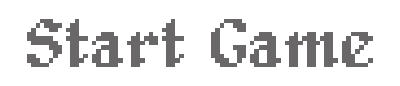
<style>
.page{position:relative;width:400px;height:86px;background:#ffffff}
.page>*{position:absolute;margin:0}
.t1{font:70px "Alagard";color:#696768}
</style>
<div class="page">
<p class="t1" style="left:27px;top:19px;width:346px;height:48px">Start Game</p>
</div>
